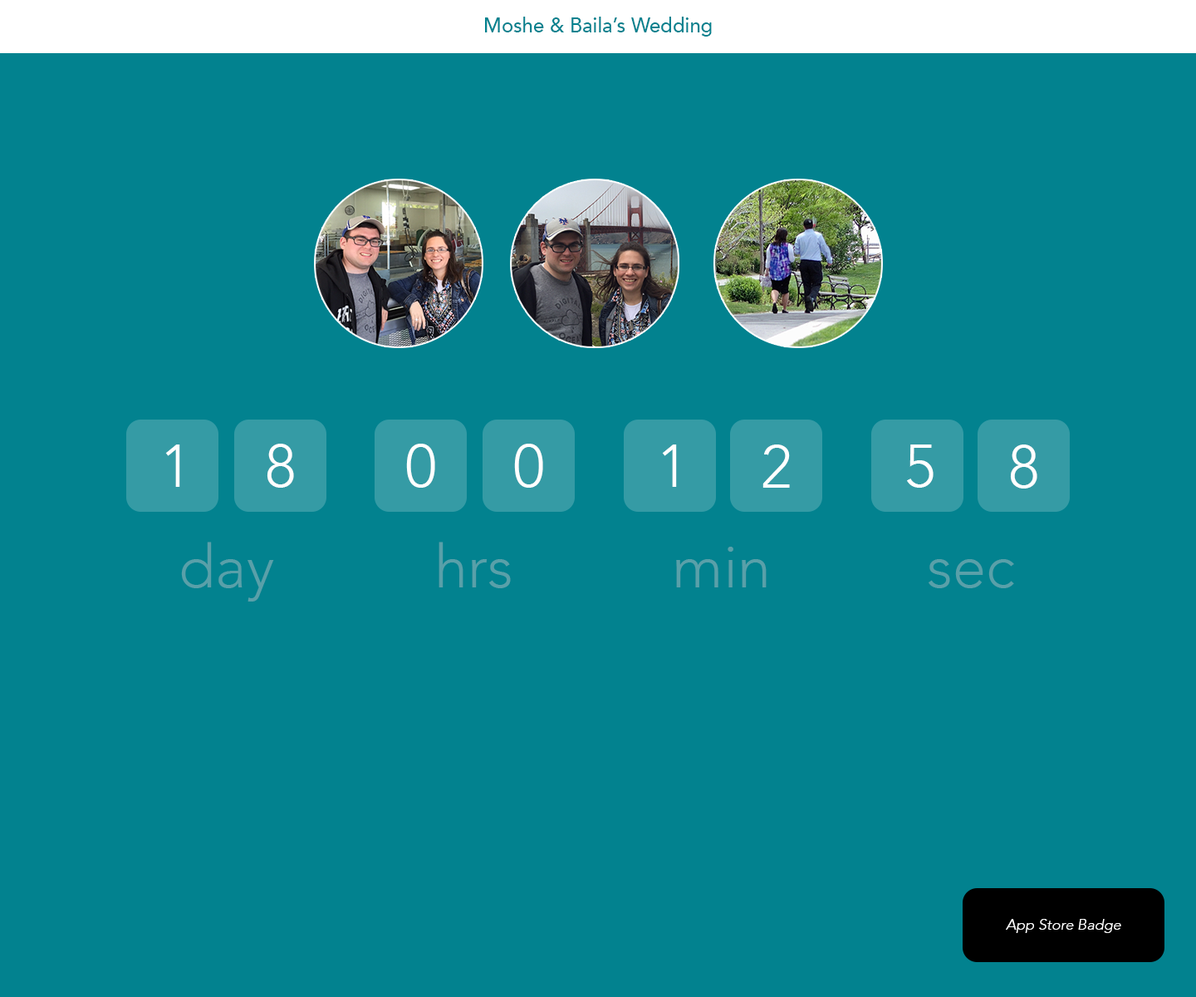
<style>
.page{position:relative;width:1196px;height:997px;background:#02828f}
.page>*{position:absolute;margin:0}
.t1{font:19.9px "Avenir-Medium";color:#02828f}
.t2{font:59.8px "Avenir-Light";color:#ffffff}
.t3{font:59.8px "Avenir-Light";color:#59a0a9}
.t4{font:15px "Avenir-LightOblique";color:#ffffff}
</style>
<div class="page">
<p class="t1" style="left:485px;top:17px;width:227px;height:20px">Moshe &amp; Baila’s Wedding</p>
<p class="t2" style="left:165px;top:444px;width:15px;height:43px">1</p>
<p class="t2" style="left:267px;top:444px;width:27px;height:44px">8</p>
<p class="t2" style="left:406px;top:444px;width:29px;height:44px">0</p>
<p class="t2" style="left:514px;top:444px;width:29px;height:44px">0</p>
<p class="t2" style="left:662px;top:444px;width:15px;height:43px">1</p>
<p class="t2" style="left:763px;top:444px;width:27px;height:44px">2</p>
<p class="t2" style="left:907px;top:444px;width:27px;height:44px">5</p>
<p class="t2" style="left:1010px;top:444px;width:28px;height:44px">8</p>
<p class="t3" style="left:181px;top:542px;width:93px;height:59px">day</p>
<p class="t3" style="left:439px;top:542px;width:72px;height:46px">hrs</p>
<p class="t3" style="left:676px;top:547px;width:91px;height:40px">min</p>
<p class="t3" style="left:929px;top:559px;width:85px;height:29px">sec</p>
<p class="t4" style="left:1006px;top:919px;width:115px;height:14px">App Store Badge</p>
</div>
